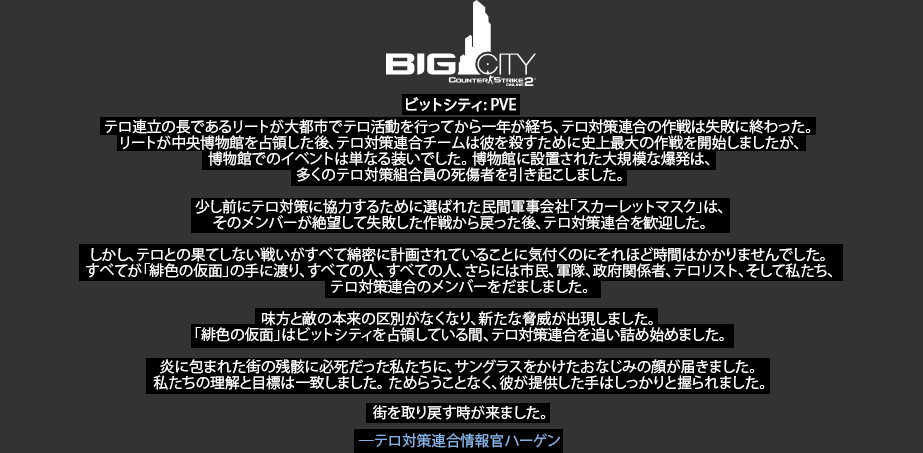
<style>
.page{position:relative;width:923px;height:453px;background:#333333}
.page>*{position:absolute;margin:0}
.t1{font:14.6px/16px "KozGoPr6N-Regular";color:#ffffff}
.t2{font:14.6px/6px "KozGoPr6N-Regular";color:#ffffff;font-weight:bold}
.t3{font:14.6px/14px "KozGoPr6N-Regular";color:#ffffff}
.t4{font:14.6px/14px "KozGoPr6N-Regular";color:#84b1e3}
</style>
<div class="page">
<p class="t1" style="left:86px;top:97px;width:746px;height:351px;text-align:center"><span class="t2">ビットシティ: PVE<br><br></span>テロ連立の長であるリートが大都市でテロ活動を行ってから一年が経ち、テロ対策連合の作戦は失敗に終わった。 <br>リートが中央博物館を占領した後、テロ対策連合チームは彼を殺すために史上最大の作戦を開始しましたが、<br>博物館でのイベントは単なる装いでした。 博物館に設置された大規模な爆発は、<br>多くのテロ対策組合員の死傷者を引き起こしました。<br><br>少し前にテロ対策に協力するために選ばれた民間軍事会社「スカーレットマスク」は、<br>そのメンバーが絶望して失敗した作戦から戻った後、テロ対策連合を歓迎した。<br><br>しかし、テロとの果てしない戦いがすべて綿密に計画されていることに気付くのにそれほど時間はかかりませんでした。 <br>すべてが「緋色の仮面」の手に渡り、すべての人、すべての人、さらには市民、軍隊、政府関係者、テロリスト、そして私たち、<br>テロ対策連合のメンバーをだましました。<br><br>味方と敵の本来の区別がなくなり、新たな脅威が出現しました。 <br>「緋色の仮面」はビットシティを占領している間、テロ対策連合を追い詰め始めました。<br><br>炎に包まれた街の残骸に必死だった私たちに、サングラスをかけたおなじみの顔が届きました。 <br>私たちの理解と目標は一致しました。 ためらうことなく、彼が提供した手はしっかりと握られました。<br><br><span class="t3">街を取り戻す時が来ました。<br><br></span><span class="t4">―テロ対策連合情報官ハーゲン</span></p>
</div>
